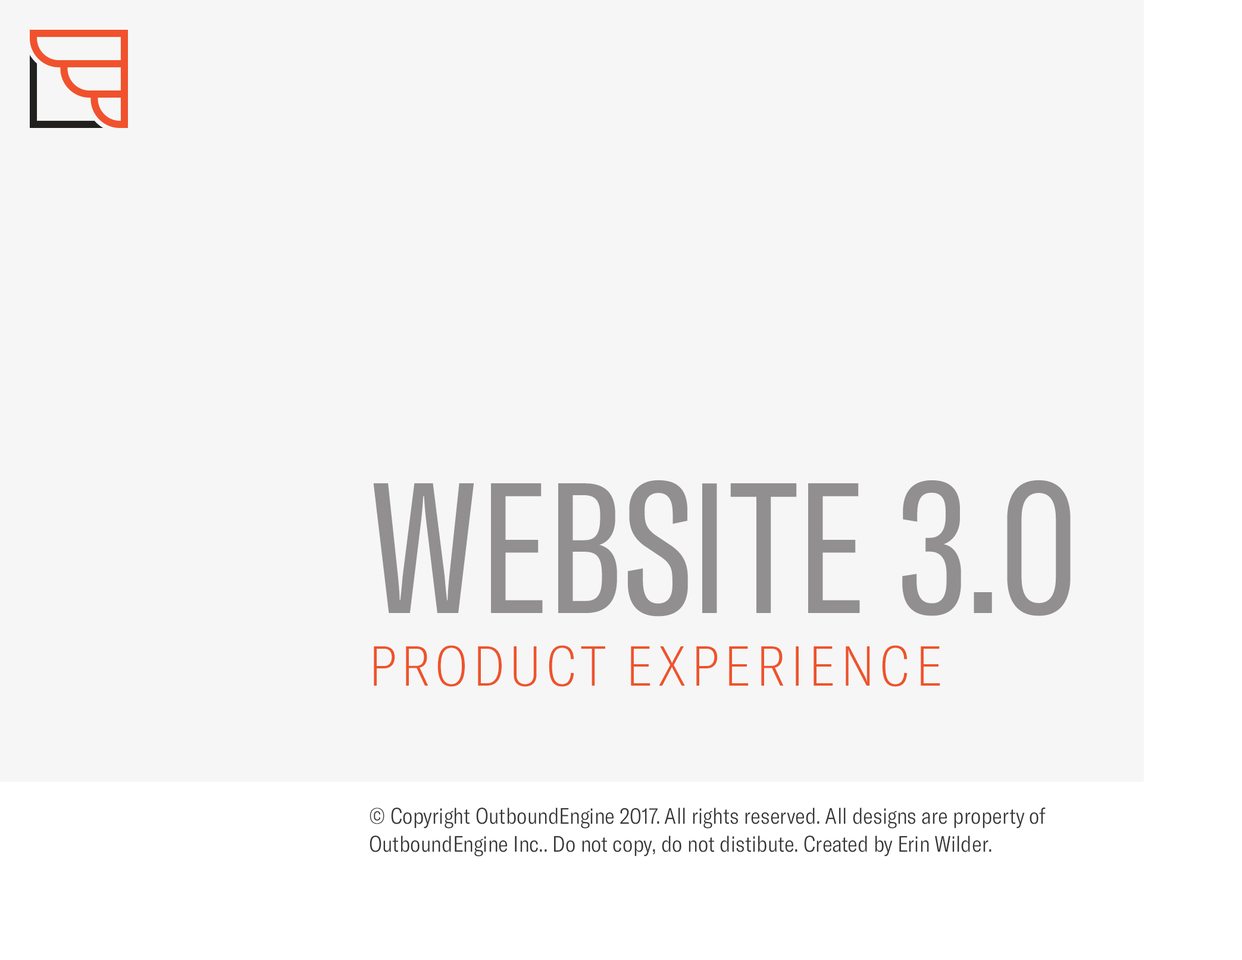
<style>
.page{position:relative;width:1242px;height:960px;background:#f6f6f6}
.page>*{position:absolute;margin:0}
.t1{font:182.5px "GTAmerica-CompressedRegular";color:#918f8f;text-transform:uppercase}
.t2{font:55.3px "GTAmerica-CondensedThin";letter-spacing:0.1em;color:#ee532b;text-transform:uppercase}
.t3{font:22.1px/27.6px "GTAmerica-CondensedLight";color:#363636}
</style>
<div class="page">
<p class="t1" style="left:373px;top:480px;width:698px;height:137px">Website 3.0</p>
<p class="t2" style="left:374px;top:645px;width:566px;height:42px">Product experience</p>
<p class="t3" style="left:370px;top:807px;width:676px;height:49px">© Copyright OutboundEngine 2017. All rights reserved. All designs are property of OutboundEngine Inc.. Do not copy, do not distibute. Created by Erin Wilder.</p>
</div>
